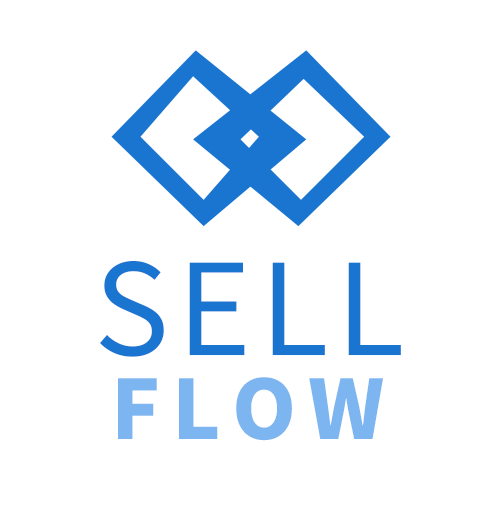
<style>
.page{position:relative;width:500px;height:518px;background:#ffffff}
.page>*{position:absolute;margin:0}
.t1{font:126px "NotoSansKR-Regular";letter-spacing:0.065em;color:#1a75d1;text-transform:uppercase}
.t2{font:81.5px "NotoSansKR-Black";letter-spacing:0.14em;color:#7cb5ef;text-transform:uppercase}
</style>
<div class="page">
<p class="t1" style="left:100px;top:261px;width:301px;height:96px">sell</p>
<p class="t2" style="left:118px;top:377px;width:265px;height:64px">flow</p>
</div>
